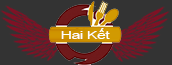
<style>
.page{position:relative;width:172px;height:65px;background:#333333}
.page>*{position:absolute;margin:0}
.t1{font:11.5px "ArialMT";letter-spacing:-0.025em;color:#ffffff;scale:1.37 1}
</style>
<div class="page">
<p class="t1" style="left:61px;top:28px;width:49px;height:11px">Hai Kết</p>
</div>
